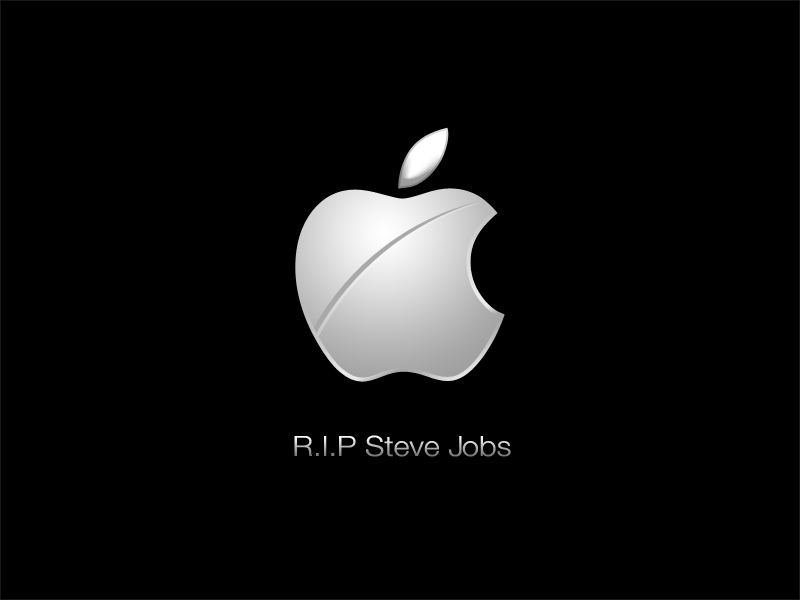
<style>
.page{position:relative;width:800px;height:600px;background:#000000}
.page>*{position:absolute;margin:0}
.t1{font:28px "HelveticaNeue-Light";scale:1.1 1}
</style>
<div class="page">
<p class="t1" style="left:294px;top:435px;width:217px;height:22px">R.I.P Steve Jobs</p>
</div>
